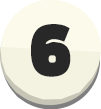
<style>
.page{position:relative;width:101px;height:109px;background:#fcfbeb}
.page>*{position:absolute;margin:0}
.t1{font:72px "MovaviGrotesqueBlack";color:#282828}
</style>
<div class="page">
<p class="t1" style="left:31px;top:24px;width:40px;height:53px">6</p>
</div>
